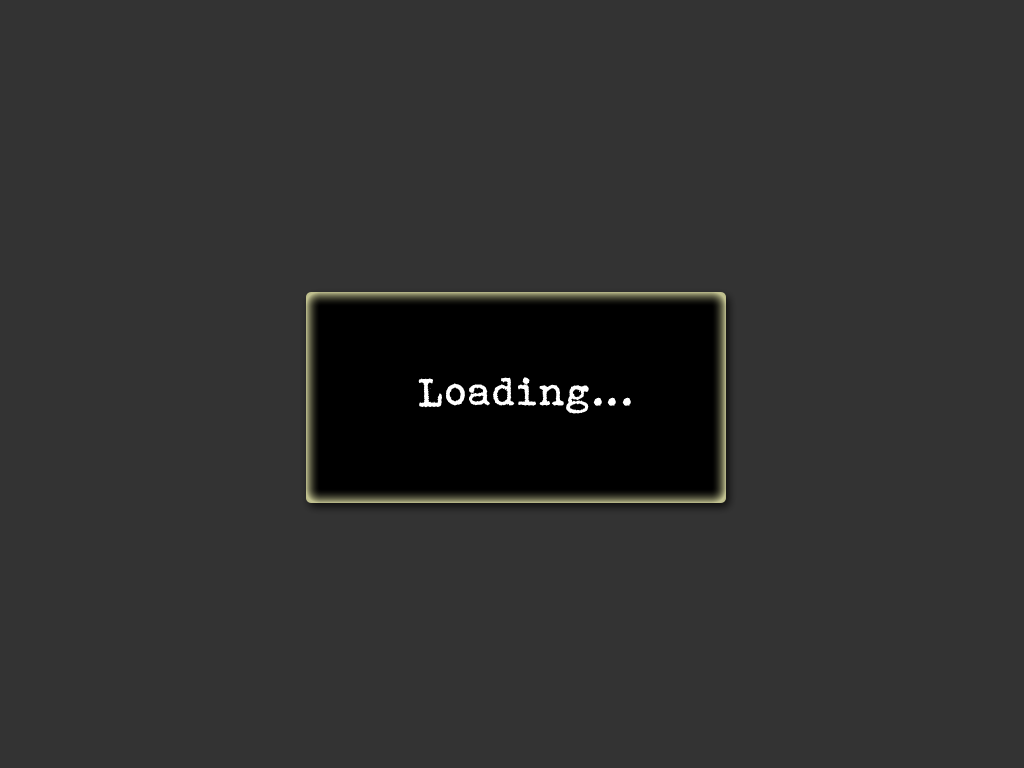
<style>
.page{position:relative;width:1024px;height:768px;background:#333333}
.page>*{position:absolute;margin:0}
.t1{font:40.6px "Bohemian-typewriter";color:#ffffff}
</style>
<div class="page">
<p class="t1" style="left:418px;top:377px;width:213px;height:37px">Loading...</p>
</div>
